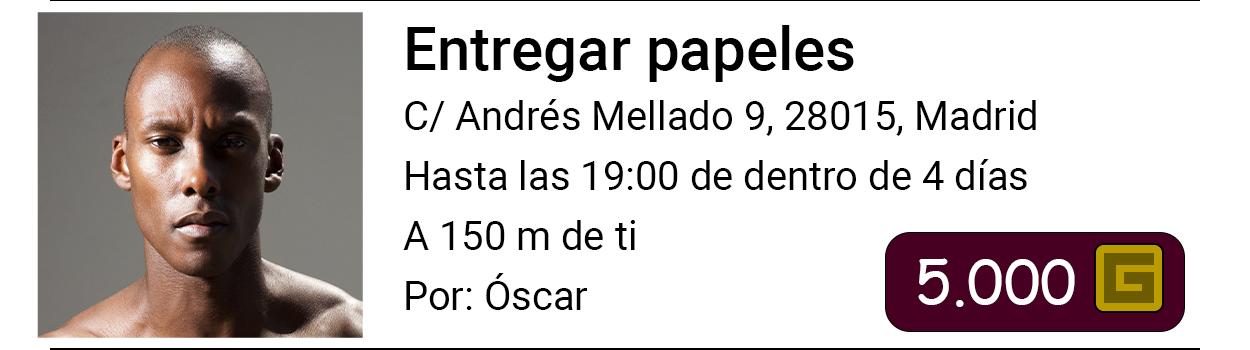
<style>
.page{position:relative;width:1250px;height:350px;background:#ffffff}
.page>*{position:absolute;margin:0}
.t1{font:40px "Roboto-Regular";color:#000000}
.t2{font:60px "Roboto-Medium";color:#000000}
.t3{font:60px "ComicSansMS";color:#ffffff}
</style>
<div class="page">
<p class="t1" style="left:403px;top:25px;width:633px;height:285px"><span class="t2">Entregar papeles<br><br></span>C/ Andrés Mellado 9, 28015, Madrid<br><br>Hasta las 19:00 de dentro de 4 días<br><br>A 150 m de ti<br><br>Por: Óscar</p>
<p class="t3" style="left:918px;top:258px;width:157px;height:49px">5.000</p>
</div>
